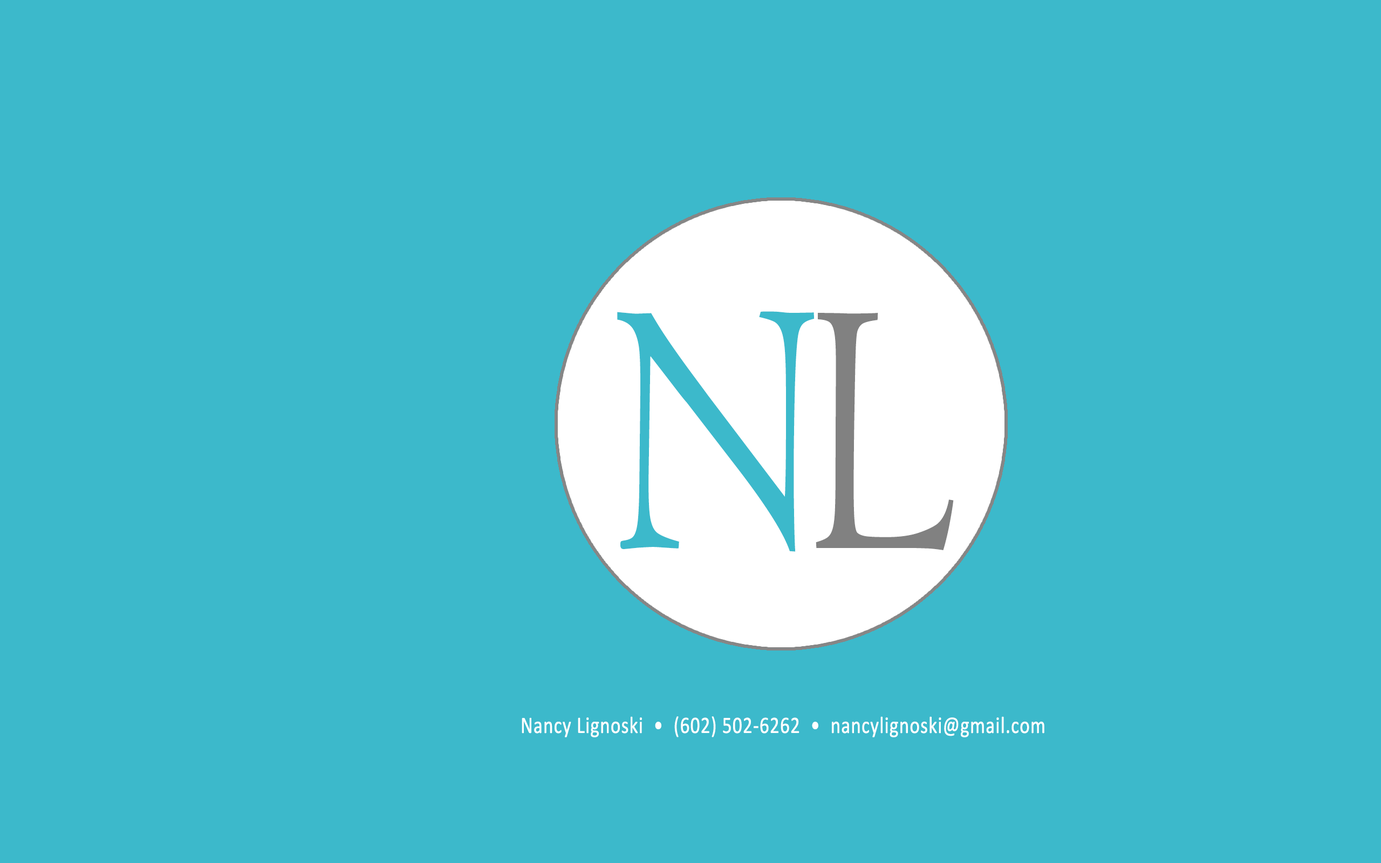
<style>
.page{position:relative;width:1381px;height:863px;background:#3cb9cb}
.page>*{position:absolute;margin:0}
.t1{font:370.9px "Centaur";color:#3cb9cb;scale:0.72 1}
.t2{font:374.7px "Centaur";color:#818181;scale:0.72 1}
.t3{font:23.6px "Calibri";letter-spacing:0.01em;color:#ffffff;font-weight:bold;scale:0.8 1}
</style>
<div class="page">
<p class="t1" style="left:617px;top:311px;width:198px;height:241px">N</p>
<p class="t2" style="left:816px;top:313px;width:138px;height:237px">L</p>
<p class="t3" style="left:522px;top:717px;width:523px;height:21px">Nancy Lignoski  •  (602) 502-6262  •  nancylignoski@gmail.com</p>
</div>
